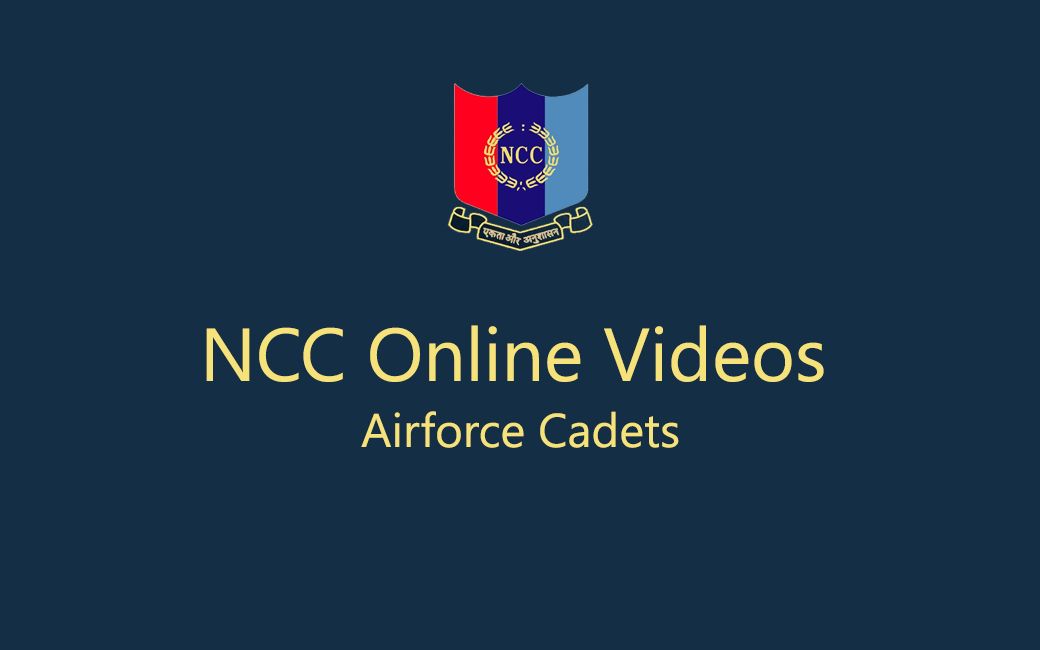
<style>
.page{position:relative;width:1040px;height:650px;background:#142e45}
.page>*{position:absolute;margin:0}
.t1{font:74.7px "NirmalaUI";color:#f6e27a}
.t2{font:47.3px "NirmalaUI";color:#f6e27a}
</style>
<div class="page">
<p class="t1" style="left:206px;top:325px;width:618px;height:57px">NCC Online Videos</p>
<p class="t2" style="left:361px;top:411px;width:318px;height:37px">Airforce Cadets</p>
</div>
